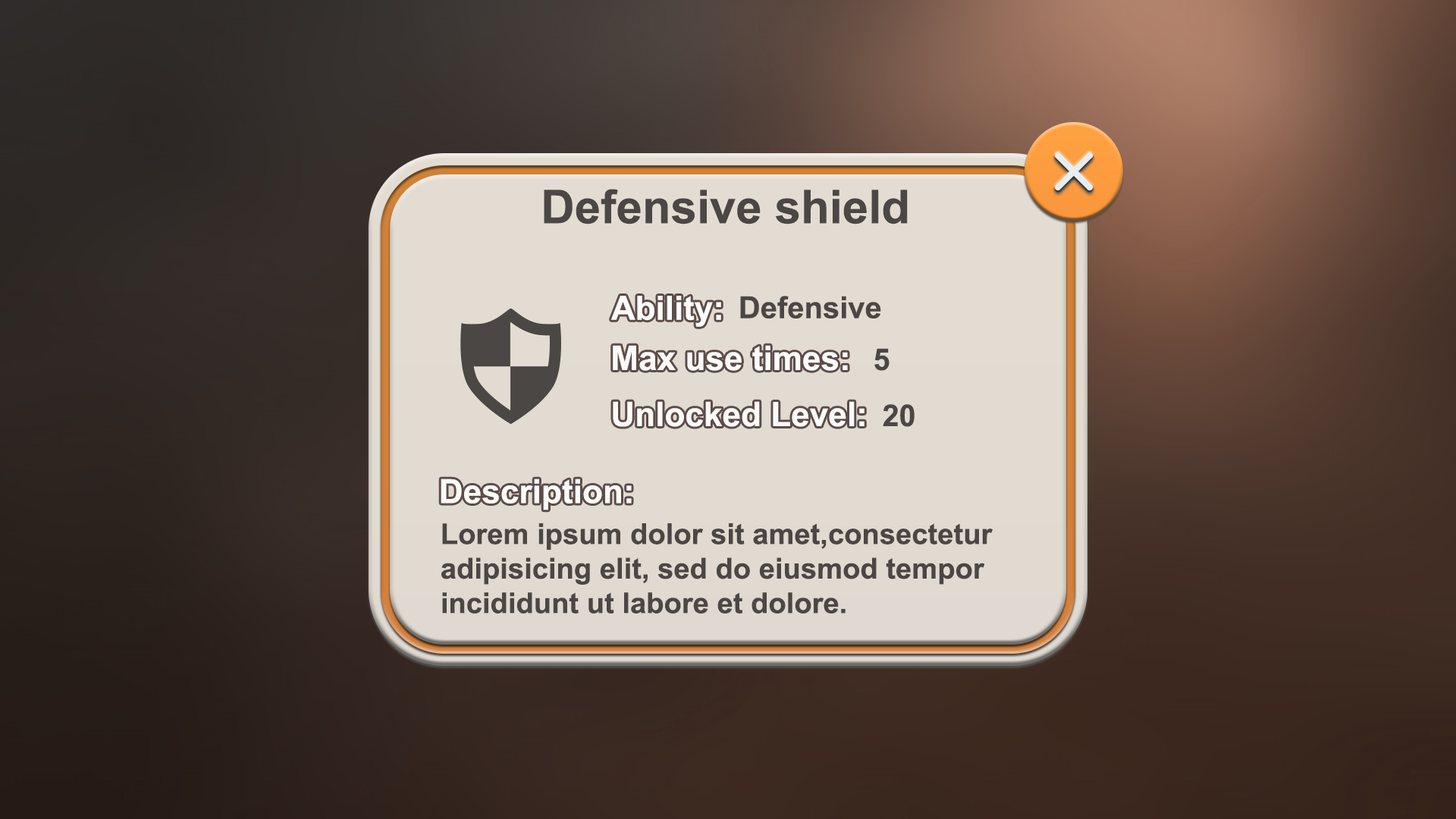
<style>
.page{position:relative;width:1456px;height:819px}
.page>*{position:absolute;margin:0}
.t1{font:46.7px "Arial-BoldMT";color:#4a4744}
.t2{font:33.3px "Arial-BoldMT";color:#ffffff}
.t3{font:30.3px "Arial-BoldMT";color:#4a4744}
.t4{font:33.9px "Arial-BoldMT";color:#ffffff}
.t5{font:28.8px "Arial-BoldMT";color:#4a4744}
</style>
<div class="page">
<p class="t1" style="left:544px;top:189px;width:364px;height:35px">Defensive shield</p>
<p class="t2" style="left:611px;top:296px;width:110px;height:31px">Ability:</p>
<p class="t3" style="left:740px;top:296px;width:141px;height:22px">Defensive</p>
<p class="t4" style="left:613px;top:345px;width:235px;height:26px">Max use times:</p>
<p class="t3" style="left:874px;top:348px;width:16px;height:23px">5</p>
<p class="t4" style="left:613px;top:401px;width:251px;height:26px">Unlocked Level:</p>
<p class="t3" style="left:883px;top:404px;width:32px;height:23px">20</p>
<p class="t2" style="left:441px;top:479px;width:191px;height:31px">Description:</p>
<p class="t5" style="left:441px;top:523px;width:552px;height:90px">Lorem ipsum dolor sit amet,consectetur <br>adipisicing elit, sed do eiusmod tempor <br>incididunt ut labore et dolore.</p>
</div>
